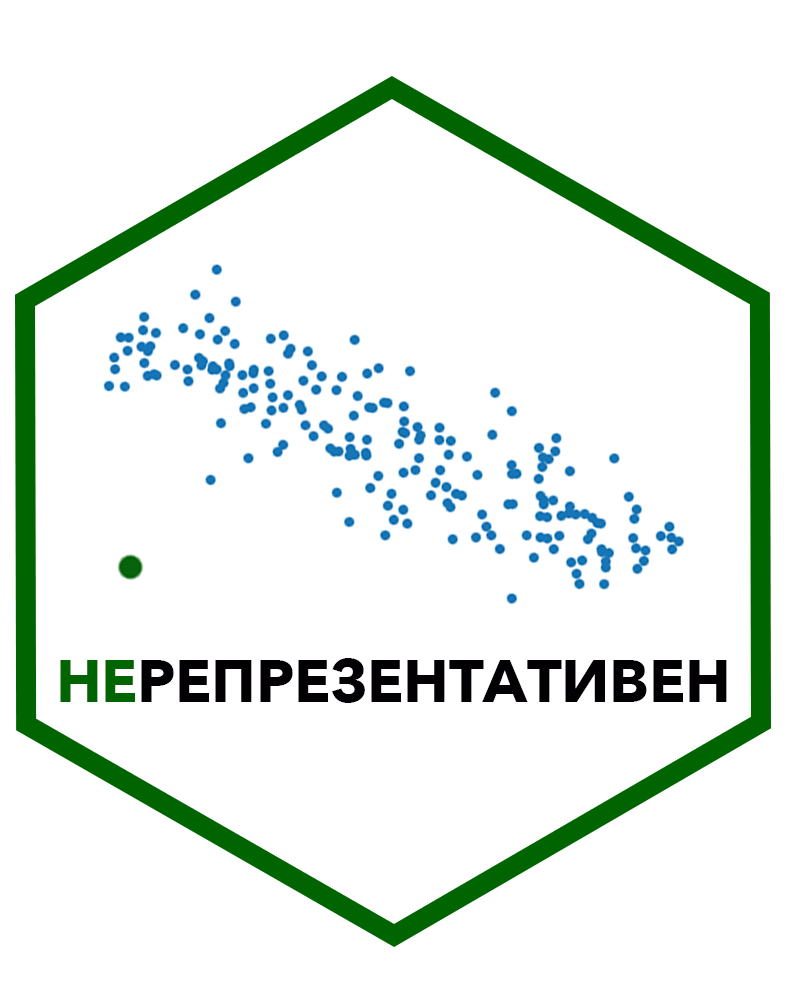
<style>
.page{position:relative;width:788px;height:988px;background:#ffffff}
.page>*{position:absolute;margin:0}
.t1{font:60px "AvenirNext-Bold";letter-spacing:-0.005em;color:#020003}
.t2{font:60px "AvenirNext-Bold";letter-spacing:-0.005em;color:#006500}
</style>
<div class="page">
<p class="t1" style="left:60px;top:658px;width:667px;height:45px"><span class="t2">НЕ</span>РЕПРЕЗЕНТАТИВЕН</p>
</div>
